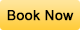
<style>
.page{position:relative;width:80px;height:30px}
.page>*{position:absolute;margin:0}
.t1{font:14px "ArialMT";color:#000000;font-weight:bold}
</style>
<div class="page">
<p class="t1" style="left:7px;top:10px;width:67px;height:11px">Book Now</p>
</div>
